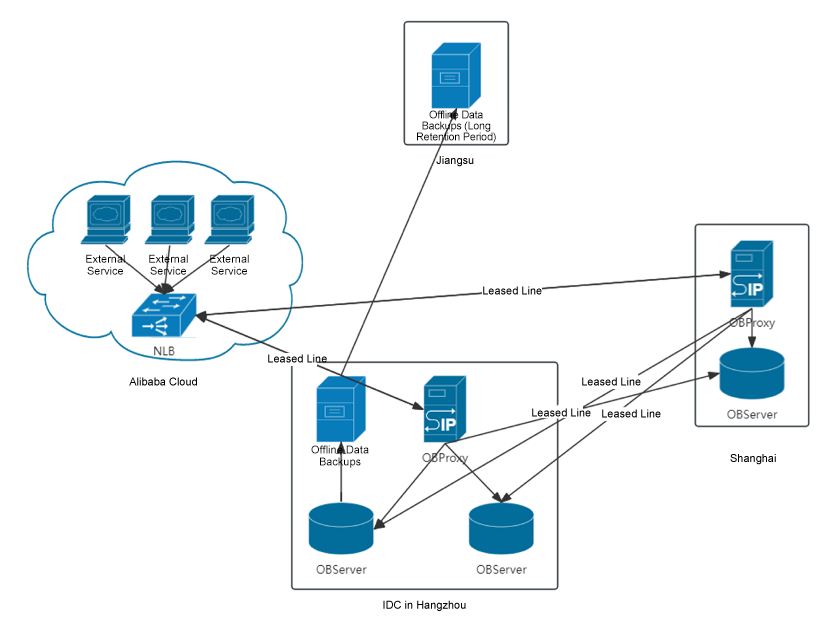
<style>
.page{position:relative;width:832px;height:644px;background:#ffffff}
.page>*{position:absolute;margin:0}
.t1{font:11px/11px "ArialMT";letter-spacing:-0.03em;color:#000000}
.t2{font:11px "ArialMT";color:#000000}
.t3{font:11px/12px "ArialMT";color:#000000}
</style>
<div class="page">
<p class="t1" style="left:417px;top:110px;width:79px;height:33px;text-align:center">Offline Data Backups (Long Retention Period)</p>
<p class="t2" style="left:436px;top:156px;width:38px;height:11px">Jiangsu</p>
<p class="t3" style="left:86px;top:254px;width:39px;height:21px;text-align:center">External Service</p>
<p class="t3" style="left:149px;top:254px;width:39px;height:21px;text-align:center">External Service</p>
<p class="t3" style="left:210px;top:254px;width:39px;height:21px;text-align:center">External Service</p>
<p class="t2" style="left:483px;top:286px;width:59px;height:9px">Leased Line</p>
<p class="t2" style="left:268px;top:354px;width:59px;height:9px">Leased Line</p>
<p class="t2" style="left:129px;top:377px;width:68px;height:9px">Alibaba Cloud</p>
<p class="t2" style="left:582px;top:377px;width:59px;height:9px">Leased Line</p>
<p class="t2" style="left:532px;top:408px;width:59px;height:9px">Leased Line</p>
<p class="t2" style="left:602px;top:409px;width:59px;height:9px">Leased Line</p>
<p class="t3" style="left:311px;top:445px;width:58px;height:23px;text-align:center">Offline Data Backups</p>
<p class="t2" style="left:730px;top:454px;width:46px;height:11px">Shanghai</p>
<p class="t2" style="left:383px;top:600px;width:83px;height:11px">IDC in Hangzhou</p>
</div>
